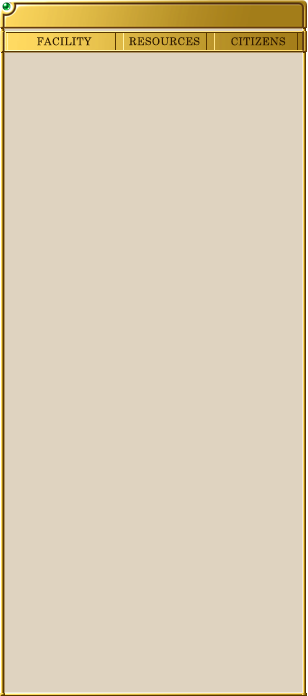
<style>
.page{position:relative;width:308px;height:696px;background:#dfd3c0}
.page>*{position:absolute;margin:0}
.t1{font:10.7px "CenturySchoolbook";letter-spacing:0.025em;color:#321a02}
</style>
<div class="page">
<p class="t1" style="left:37px;top:37px;width:55px;height:9px">FACILITY</p>
<p class="t1" style="left:129px;top:37px;width:71px;height:9px">RESOURCES</p>
<p class="t1" style="left:231px;top:37px;width:55px;height:9px">CITIZENS</p>
</div>
